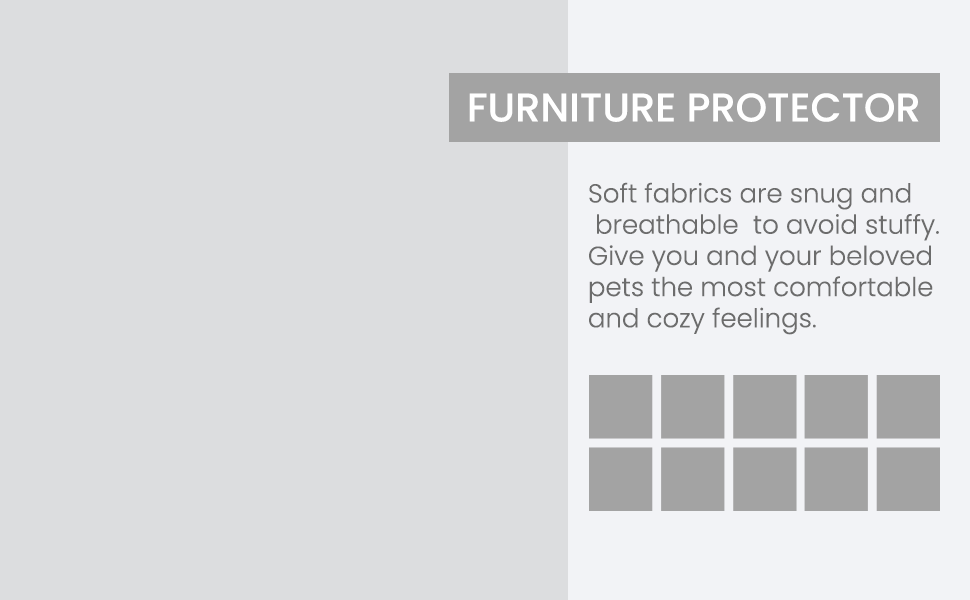
<style>
.page{position:relative;width:970px;height:600px;background:#dcdddf}
.page>*{position:absolute;margin:0}
.t1{font:40px "Poppins-Medium";color:#ffffff}
.t2{font:26px "Poppins-Light";color:#6c6c6c}
</style>
<div class="page">
<p class="t1" style="left:469px;top:93px;width:450px;height:29px">FURNITURE PROTECTOR</p>
<p class="t2" style="left:589px;top:182px;width:350px;height:153px">Soft fabrics are snug and<br> breathable  to avoid stuffy. <br>Give you and your beloved <br>pets the most comfortable <br>and cozy feelings.</p>
</div>
